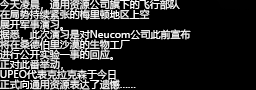
<style>
.page{position:relative;width:256px;height:90px;background:#000000}
.page>*{position:absolute;margin:0}
.t1{font:10px/10px "MicrosoftYaHei";color:#fefefe}
</style>
<div class="page">
<p class="t1" style="left:0px;top:0px;width:191px;height:90px">今天凌晨，通用资源公司旗下的飞行部队<br>在局势持续紧张的梅里顿地区上空<br>展开军事演习。<br>据悉，此次演习是对Neucom公司此前宣布<br>将在桑德伯里沙漠的生物工厂<br>进行公开实验一事的回应。<br>正对此番举动，<br>UPEO代表克拉克森于今日<br>正式向通用资源表达了遗憾……</p>
</div>
